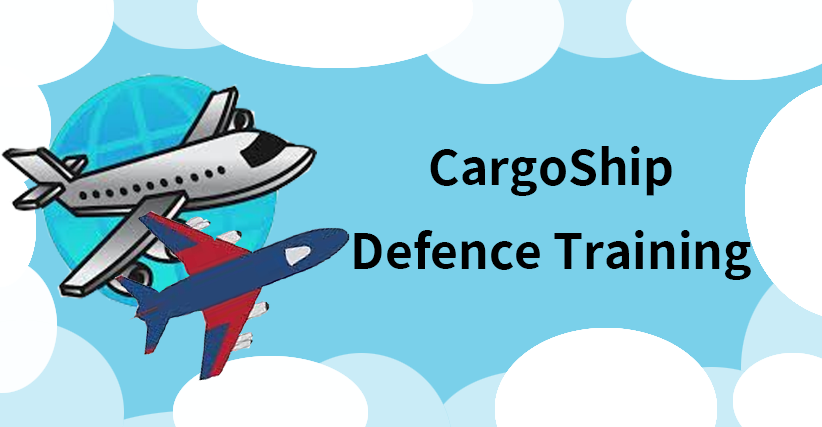
<style>
.page{position:relative;width:822px;height:427px;background:#7ad0ea}
.page>*{position:absolute;margin:0}
.t1{font:48px "TaipeiSansTCBeta-Bold";color:#000000}
</style>
<div class="page">
<p class="t1" style="left:354px;top:146px;width:397px;height:134px;text-align:center">CargoShip <br>Defence Training</p>
</div>
